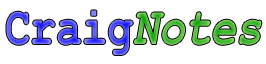
<style>
.page{position:relative;width:266px;height:64px;background:#ffffff}
.page>*{position:absolute;margin:0}
.t1{font:52.9px "CourierNewPS-BoldMT";scale:0.81 1}
.t2{font:52.9px "CourierNewPS-BoldItalicMT";scale:0.81 1}
</style>
<div class="page">
<p class="t1" style="left:6px;top:10px;width:256px;height:45px">Craig<span class="t2">Notes</span></p>
</div>
